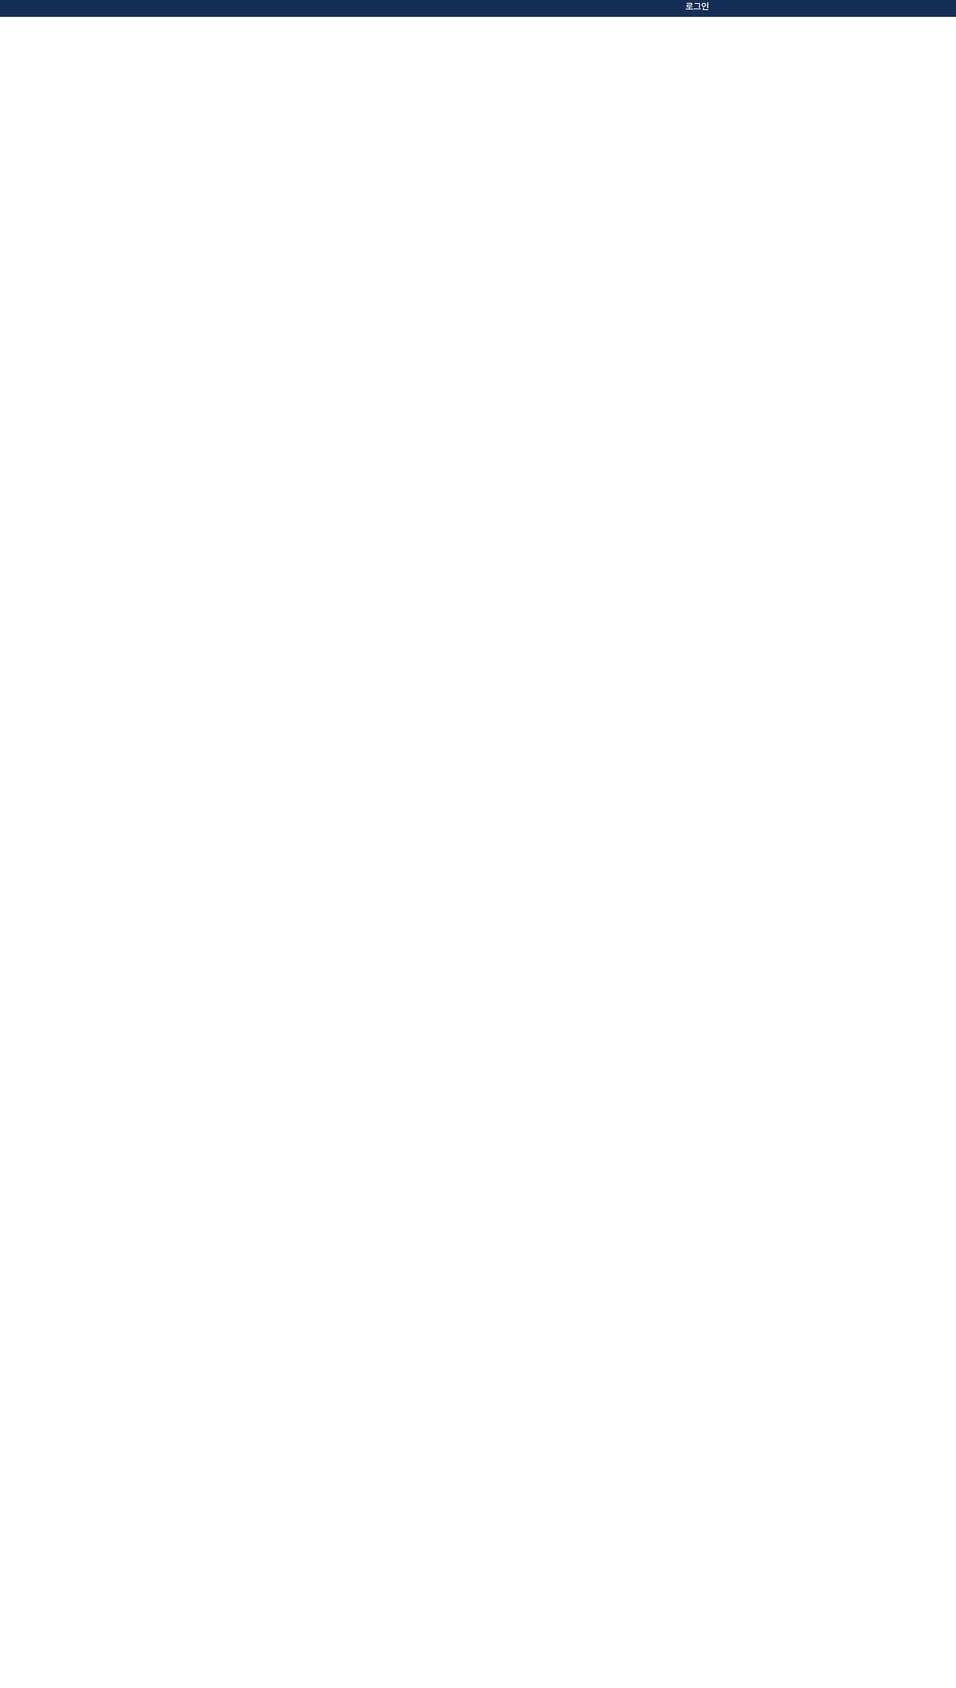
<style>
.page{position:relative;width:956px;height:1688px;background:#ffffff}
.page>*{position:absolute;margin:0}
.t1{font:9px "Pretendard-Medium";color:#ffffff}
</style>
<div class="page">
<p class="t1" style="left:686px;top:2px;width:23px;height:8px">로그인</p>
</div>
